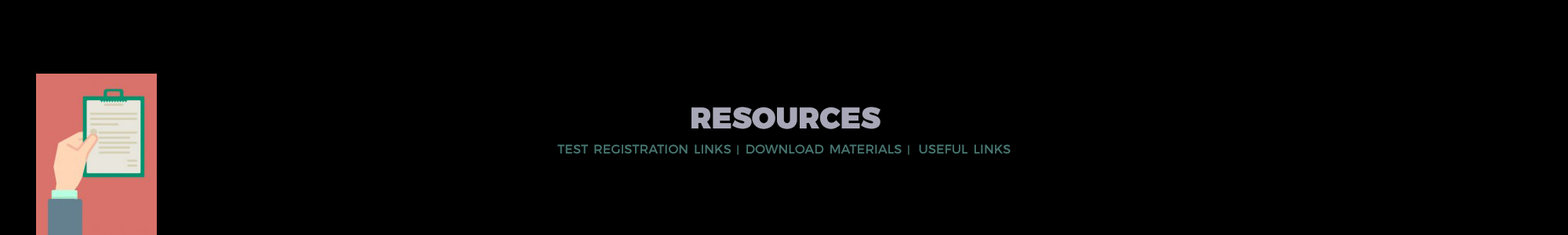
<style>
.page{position:relative;width:1568px;height:235px;background:#000000}
.page>*{position:absolute;margin:0}
.t1{font:29.8px "Montserrat-Black";color:#a8a7b7;font-variant:small-caps}
.t2{font:18px "Montserrat-Regular";color:#487570;font-variant:small-caps}
.t3{font:10.2px "Montserrat-Regular";color:#487570;font-variant:small-caps}
</style>
<div class="page">
<p class="t1" style="left:691px;top:107px;width:189px;height:22px">RESOURCES</p>
<p class="t2" style="left:557px;top:144px;width:454px;height:11px">test registration links <span class="t3">|  </span>download materials <span class="t3">| </span> useful links</p>
</div>
